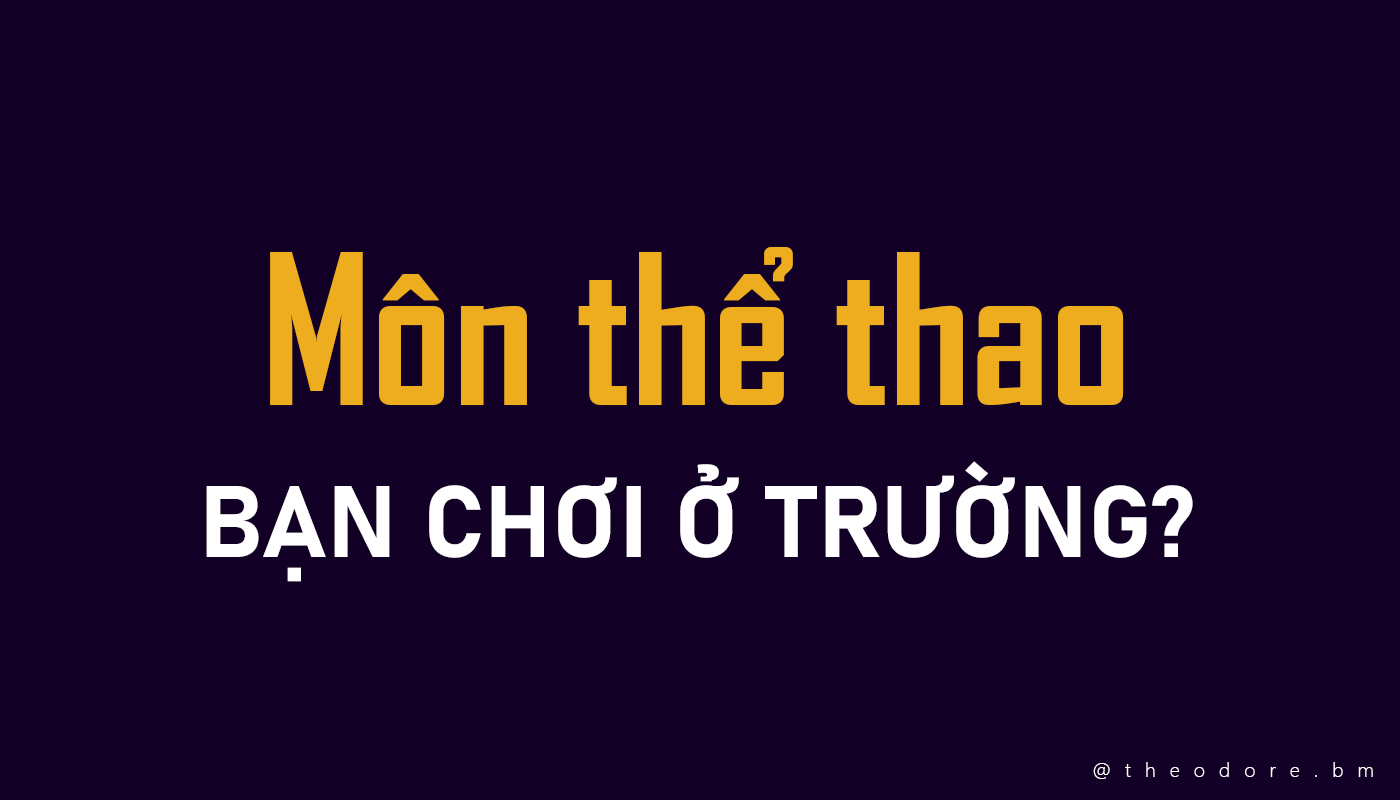
<style>
.page{position:relative;width:1400px;height:800px;background:#120026}
.page>*{position:absolute;margin:0}
.t1{font:200px "SVN-AgencyFBbold";color:#eead1f}
.t2{font:100px "Bahnschrift-Bold";color:#ffffff}
.t3{font:20px "SegoeUI-Light";letter-spacing:0.7em;color:#ffffff}
</style>
<div class="page">
<p class="t1" style="left:270px;top:247px;width:854px;height:158px">Môn thể thao</p>
<p class="t2" style="left:206px;top:461px;width:987px;height:121px">BẠN CHƠI Ở TRƯỜNG?</p>
<p class="t3" style="left:1093px;top:762px;width:280px;height:17px">@theodore.bm</p>
</div>
